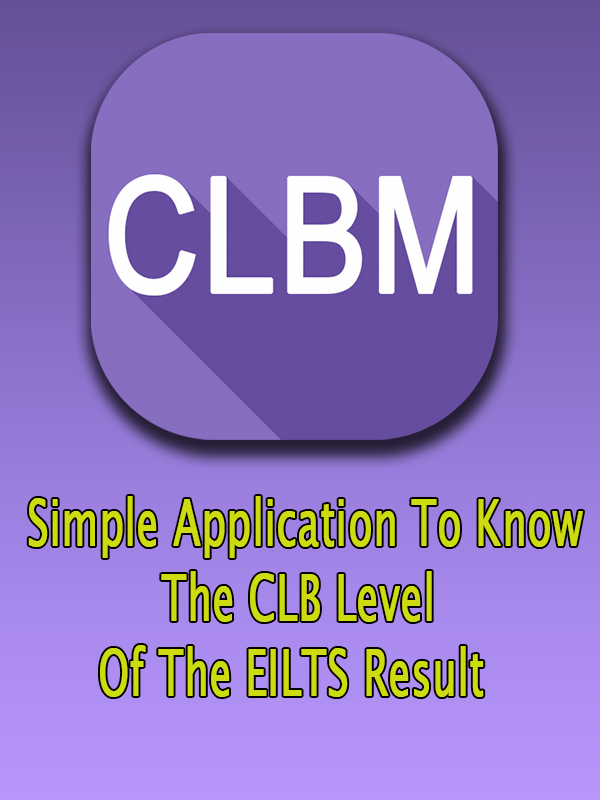
<style>
.page{position:relative;width:600px;height:800px}
.page>*{position:absolute;margin:0}
.t1{font:62.7px "LucidaSansUnicode";color:#cfdb11;font-weight:bold;scale:0.62 1}
</style>
<div class="page">
<p class="t1" style="left:28px;top:496px;width:555px;height:201px;text-align:center">Simple Application To Know <br>The CLB Level<br> Of The EILTS Result</p>
</div>
